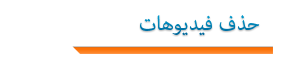
<style>
.page{position:relative;width:282px;height:69px;background:#ffffff}
.page>*{position:absolute;margin:0}
.t1{font:28px "AdobeArabic-Regular";color:#0076a9}
</style>
<div class="page">
<p class="t1" style="left:140px;top:15px;width:120px;height:21px">حذف فيديوهات</p>
</div>
